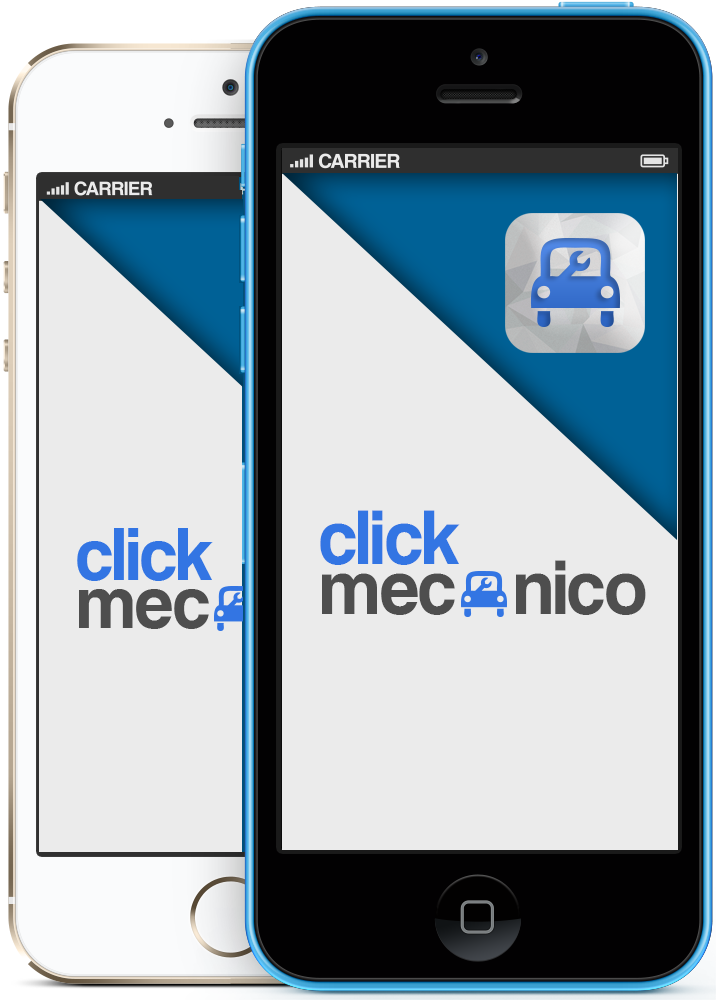
<style>
.page{position:relative;width:716px;height:1000px;background:#ebebeb}
.page>*{position:absolute;margin:0}
.t1{font:78.5px "CoolveticaRg-Regular";color:#3375e3}
.t2{font:78.5px "CoolveticaRg-Regular";color:#4e4e4e}
</style>
<div class="page">
<p class="t1" style="left:320px;top:510px;width:140px;height:55px">click</p>
<p class="t2" style="left:322px;top:560px;width:324px;height:55px">mec   nico</p>
</div>
